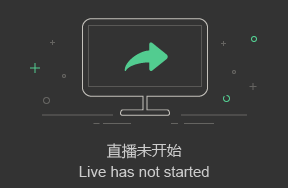
<style>
.page{position:relative;width:288px;height:188px;background:#333333}
.page>*{position:absolute;margin:0}
.t1{font:15px "MicrosoftYaHei";color:#cccccc}
.t2{font:15px "ArialMT";color:#cccccc}
</style>
<div class="page">
<p class="t1" style="left:107px;top:143px;width:75px;height:16px">直播未开始</p>
<p class="t2" style="left:79px;top:166px;width:130px;height:11px">Live has not started</p>
</div>
